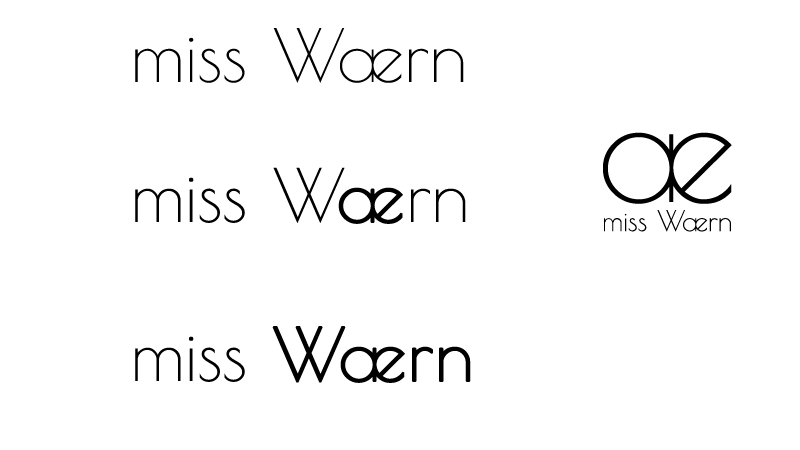
<style>
.page{position:relative;width:800px;height:450px;background:#ffffff}
.page>*{position:absolute;margin:0}
.t1{font:72px "PoiretOne-Regular";color:#000000}
.t2{font:72px "PoiretOne-Regular";letter-spacing:-0.125em;color:#000000}
.t3{font:72px "PoiretOne-Regular";letter-spacing:0.01em;color:#000000}
.t4{font:150px "PoiretOne-Regular";letter-spacing:0.01em;color:#000000}
.t5{font:72px "PoiretOne-Regular";letter-spacing:0.01em;color:#000000;font-weight:bold}
.t6{font:27.9px "PoiretOne-Regular";color:#000000}
.t7{font:27.9px "PoiretOne-Regular";letter-spacing:-0.125em;color:#000000}
.t8{font:27.9px "PoiretOne-Regular";letter-spacing:0.01em;color:#000000}
.t9{font:72px "PoiretOne-Regular";letter-spacing:-0.125em;color:#000000;font-weight:bold}
.t10{font:72px "PoiretOne-Regular";color:#000000;font-weight:bold}
</style>
<div class="page">
<p class="t1" style="left:135px;top:28px;width:329px;height:55px">miss <span class="t2">W</span><span class="t3">æ</span>rn</p>
<p class="t4" style="left:603px;top:132px;width:129px;height:72px">æ</p>
<p class="t1" style="left:135px;top:167px;width:331px;height:57px">miss <span class="t2">W</span><span class="t5">æ</span>rn</p>
<p class="t6" style="left:604px;top:210px;width:127px;height:22px">miss <span class="t7">W</span><span class="t8">æ</span>rn</p>
<p class="t1" style="left:135px;top:326px;width:336px;height:57px">miss <span class="t9">W</span><span class="t5">æ</span><span class="t10">rn</span></p>
</div>
